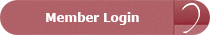
<style>
.page{position:relative;width:210px;height:35px}
.page>*{position:absolute;margin:0}
.t1{font:12.5px "Verdana-Bold";letter-spacing:-0.025em;color:#fefefe}
</style>
<div class="page">
<p class="t1" style="left:46px;top:12px;width:93px;height:13px">Member Login</p>
</div>
